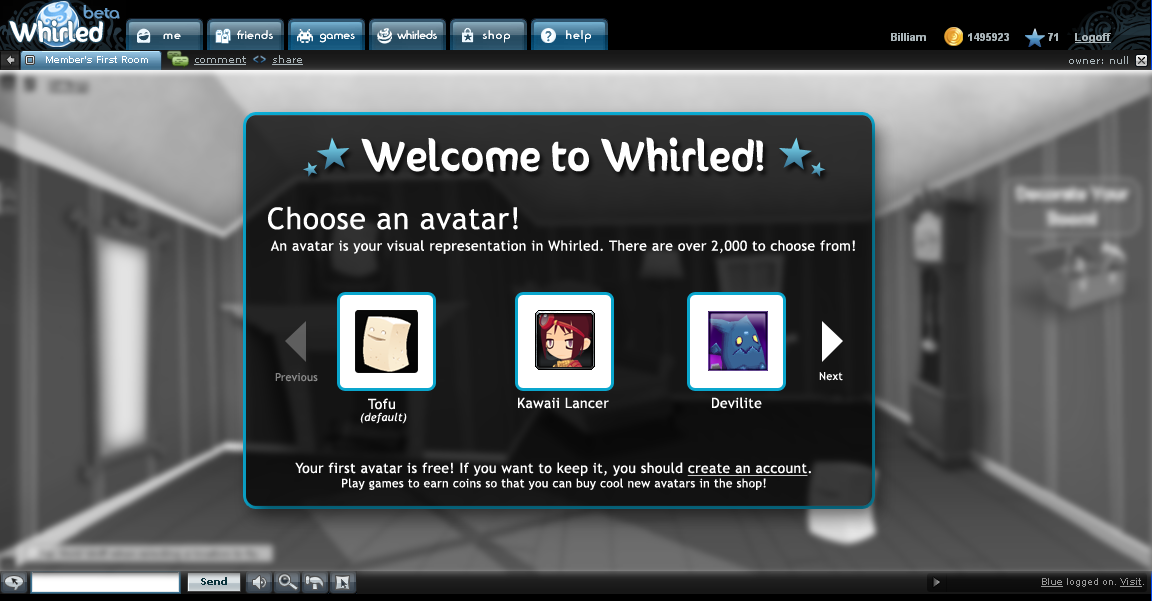
<style>
.page{position:relative;width:1152px;height:601px}
.page>*{position:absolute;margin:0}
.t1{font:36px "SunnySide";letter-spacing:0.025em;color:#ffffff}
.t2{font:14px "TrebuchetMS";letter-spacing:0.025em;color:#ffffff}
.t3{font:30px "TrebuchetMS";letter-spacing:0.025em;color:#ffffff}
.t4{font:11px "TrebuchetMS";letter-spacing:0.025em;color:#878787}
.t5{font:11px "TrebuchetMS";letter-spacing:0.025em;color:#ffffff}
.t6{font:11px "TrebuchetMS-Italic";letter-spacing:0.025em;color:#ffffff}
.t7{font:12px "TrebuchetMS";letter-spacing:0.025em;color:#ffffff}
.t8{font:14px "TrebuchetMS";letter-spacing:0.025em;color:#ffffff;text-decoration:underline}
</style>
<div class="page">
<p class="t1" style="left:361px;top:137px;width:403px;height:35px">Welcome to Whirled!</p>
<p class="t2" style="left:268px;top:206px;width:587px;height:48px"><span class="t3">Choose an avatar!<br></span> An avatar is your visual representation in Whirled. There are over 2,000 to choose from!</p>
<p class="t4" style="left:275px;top:373px;width:43px;height:9px">Previous</p>
<p class="t5" style="left:819px;top:372px;width:24px;height:9px">Next</p>
<p class="t2" style="left:368px;top:398px;width:27px;height:12px">Tofu</p>
<p class="t2" style="left:518px;top:397px;width:91px;height:12px">Kawaii Lancer</p>
<p class="t2" style="left:712px;top:397px;width:50px;height:12px">Devilite</p>
<p class="t6" style="left:360px;top:412px;width:47px;height:12px">(default)</p>
<p class="t7" style="left:295px;top:462px;width:516px;height:28px;text-align:center"><span class="t2">Your first avatar is free! If you want to keep it, you should </span><span class="t8">create an account</span><span class="t2">.<br></span>Play games to earn coins so that you can buy cool new avatars in the shop!</p>
</div>
